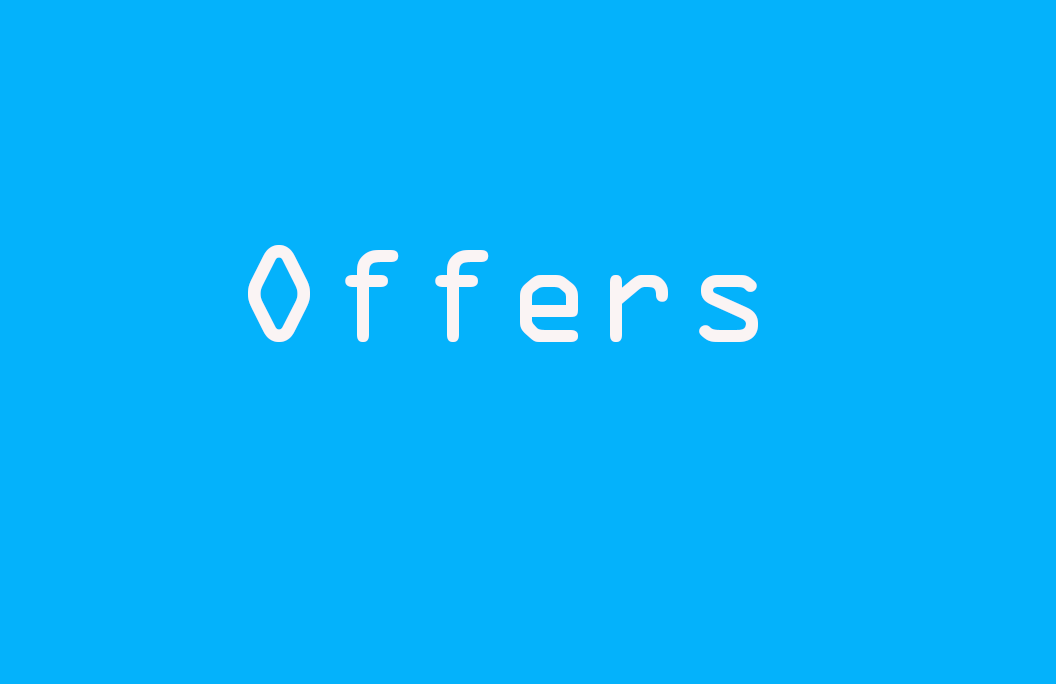
<style>
.page{position:relative;width:1056px;height:684px;background:#04b2fb}
.page>*{position:absolute;margin:0}
.t1{font:125px "OCRAStd";color:#faf4f4}
</style>
<div class="page">
<p class="t1" style="left:248px;top:245px;width:510px;height:97px">Offers</p>
</div>
